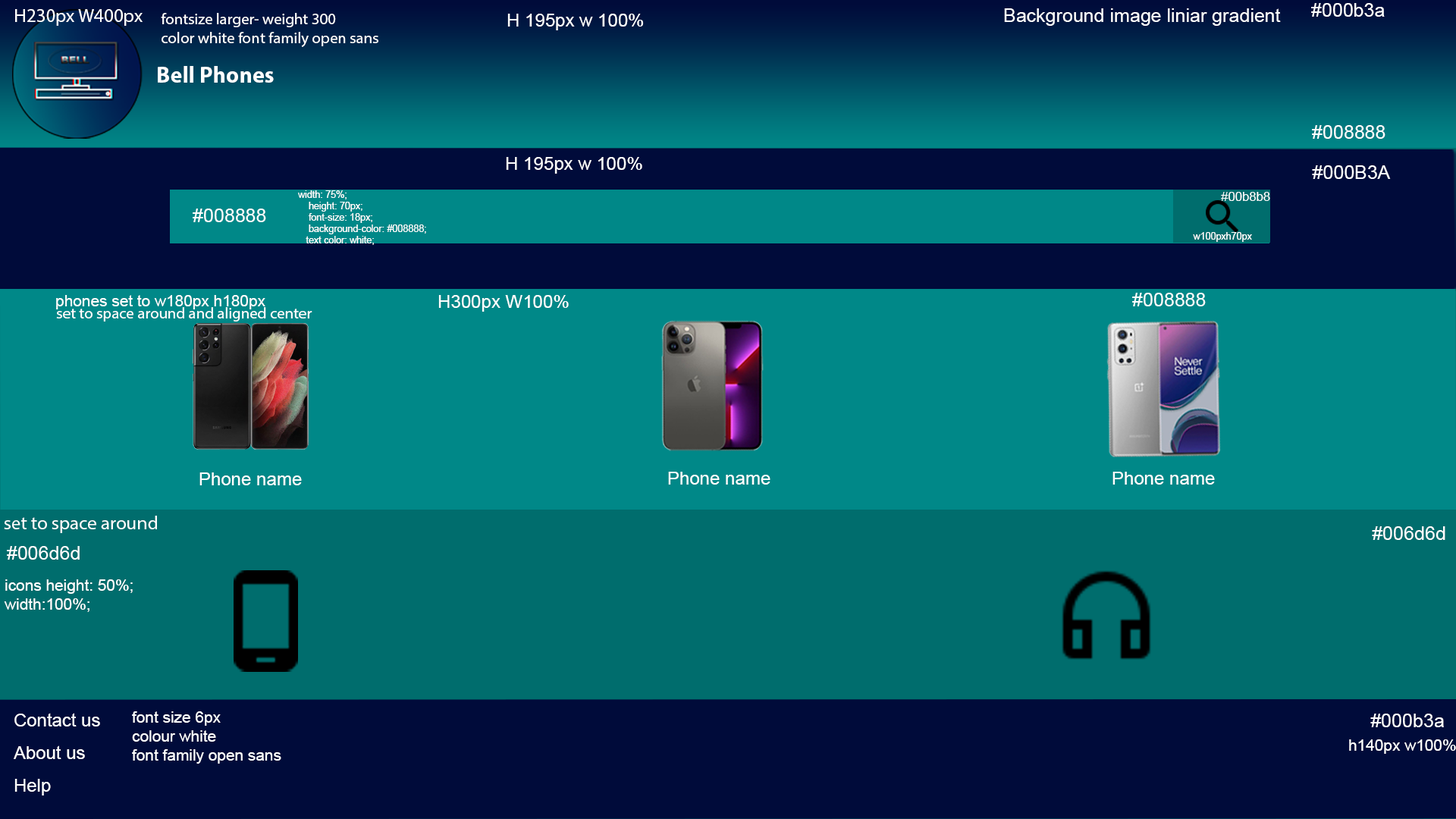
<style>
.page{position:relative;width:1456px;height:819px;background:#008888}
.page>*{position:absolute;margin:0}
.t1{font:19px "ArialMT";color:#ffffff}
.t2{font:19px "MyriadPro-Regular";color:#ffffff}
.t3{font:15.8px "MyriadPro-Regular";color:#ffffff}
.t4{font:18.2px "ArialMT";color:#ffffff}
.t5{font:22.7px "MyriadPro-Bold";color:#ffffff}
.t6{font:9.5px "ArialMT";color:#ffffff}
.t7{font:12.6px "ArialMT";color:#ffffff}
.t8{font:15.8px "ArialMT";color:#ffffff}
.t9{font:18.1px "ArialMT";color:#ffffff}
</style>
<div class="page">
<p class="t1" style="left:1311px;top:3px;width:74px;height:14px">#000b3a</p>
<p class="t2" style="left:15px;top:9px;width:128px;height:17px">H230px W400px</p>
<p class="t3" style="left:161px;top:13px;width:217px;height:34px">fontsize larger- weight 300<br>color white font family open sans</p>
<p class="t4" style="left:507px;top:14px;width:137px;height:16px">H 195px w 100%</p>
<p class="t1" style="left:1004px;top:8px;width:277px;height:18px">Background image liniar gradient</p>
<p class="t5" style="left:158px;top:66px;width:116px;height:17px">Bell Phones</p>
<p class="t1" style="left:1312px;top:125px;width:73px;height:14px">#008888</p>
<p class="t4" style="left:506px;top:157px;width:136px;height:17px">H 195px w 100%</p>
<p class="t1" style="left:1312px;top:165px;width:79px;height:14px">#000B3A</p>
<p class="t6" style="left:298px;top:190px;width:128px;height:55px">width: 75%;<br>    height: 70px;<br>    font-size: 18px;<br>    background-color: #008888;<br>   text color: white;</p>
<p class="t7" style="left:1221px;top:192px;width:49px;height:9px">#00b8b8</p>
<p class="t1" style="left:193px;top:209px;width:73px;height:13px">#008888</p>
<p class="t6" style="left:1193px;top:232px;width:59px;height:10px">w100pxh70px</p>
<p class="t1" style="left:1132px;top:293px;width:74px;height:13px">#008888</p>
<p class="t8" style="left:56px;top:295px;width:209px;height:14px">phones set to w180px h180px</p>
<p class="t4" style="left:438px;top:295px;width:131px;height:17px">H300px W100%</p>
<p class="t3" style="left:56px;top:307px;width:256px;height:15px">set to space around and aligned center</p>
<p class="t4" style="left:199px;top:472px;width:103px;height:13px">Phone name</p>
<p class="t4" style="left:668px;top:472px;width:102px;height:13px">Phone name</p>
<p class="t4" style="left:1112px;top:472px;width:103px;height:13px">Phone name</p>
<p class="t2" style="left:4px;top:516px;width:153px;height:17px">set to space around</p>
<p class="t1" style="left:1372px;top:526px;width:73px;height:14px">#006d6d</p>
<p class="t1" style="left:7px;top:546px;width:73px;height:14px">#006d6d</p>
<p class="t8" style="left:4px;top:579px;width:129px;height:33px">icons height: 50%;<br>width:100%;</p>
<p class="t9" style="left:14px;top:713px;width:86px;height:13px">Contact us</p>
<p class="t8" style="left:132px;top:711px;width:149px;height:53px">font size 6px<br>colour white<br>font family open sans</p>
<p class="t1" style="left:1370px;top:714px;width:74px;height:13px">#000b3a</p>
<p class="t9" style="left:14px;top:745px;width:71px;height:14px">About us</p>
<p class="t8" style="left:1349px;top:739px;width:107px;height:15px">h140px w100%</p>
<p class="t9" style="left:14px;top:779px;width:37px;height:16px">Help</p>
</div>
